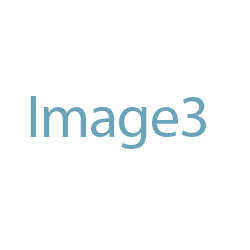
<style>
.page{position:relative;width:250px;height:250px;background:#ffffff}
.page>*{position:absolute;margin:0}
.t1{font:60px "MyriadPro-Regular";letter-spacing:0.01em;color:#6ba4b8}
</style>
<div class="page">
<p class="t1" style="left:30px;top:96px;width:176px;height:53px">Image3</p>
</div>
